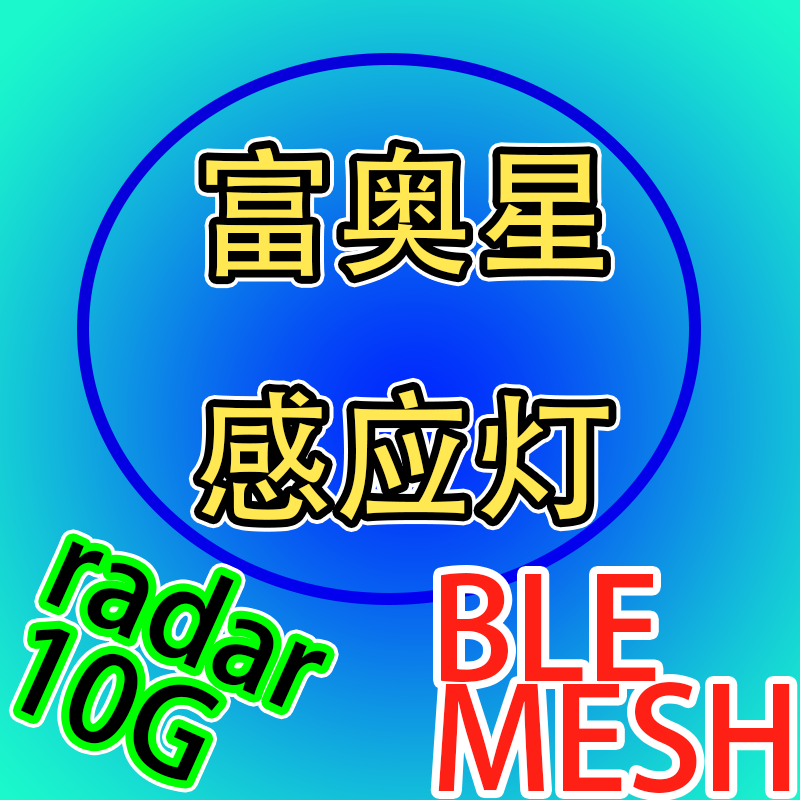
<style>
.page{position:relative;width:800px;height:800px}
.page>*{position:absolute;margin:0}
.t1{font:140px "AdobeHeitiStd-Regular";color:#ffe851}
.t2{font:120px/110px "AdobeHeitiStd-Regular";color:#000000}
.t3{font:140px/110px "AdobeHeitiStd-Regular";color:#ff2015}
</style>
<div class="page">
<p class="t1" style="left:200px;top:146px;width:409px;height:375px">富奥星<br>感应灯</p>
<p class="t2" style="left:20px;top:541px;width:307px;height:240px;rotate:24deg">radar<br>10G</p>
<p class="t3" style="left:438px;top:573px;width:352px;height:220px">BLE<br>MESH</p>
</div>
